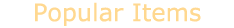
<style>
.page{position:relative;width:234px;height:28px;background:#ffffff}
.page>*{position:absolute;margin:0}
.t1{font:24px "Verdana";color:#ffd890}
</style>
<div class="page">
<p class="t1" style="left:35px;top:2px;width:166px;height:24px">Popular Items</p>
</div>
